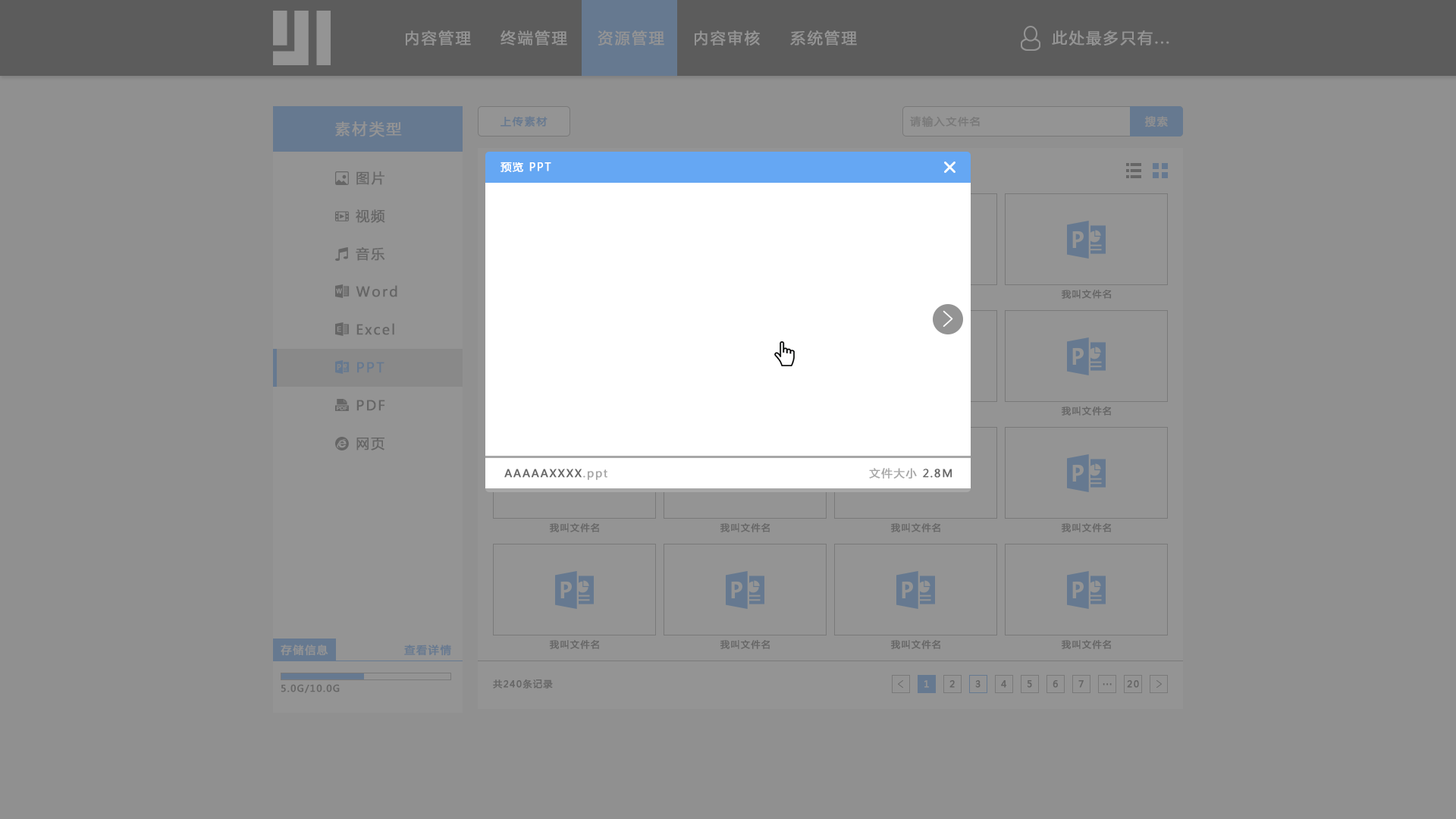
<style>
.page{position:relative;width:1456px;height:819px;background:#909090}
.page>*{position:absolute;margin:0}
.t1{font:15.2px "MicrosoftYaHei";letter-spacing:0.1em;color:#949494;font-weight:bold}
.t2{font:10.6px "MicrosoftYaHei";letter-spacing:0.1em;color:#667990;font-weight:bold}
.t3{font:10.6px "MicrosoftYaHei";letter-spacing:0.1em;color:#797979;font-weight:bold}
.t4{font:10.6px "MicrosoftYaHei";letter-spacing:0.1em;color:#909090;font-weight:bold}
.t5{font:10.6px "MicrosoftYaHei";letter-spacing:0.1em;color:#ffffff;font-weight:bold}
.t6{font:13.6px "MicrosoftYaHei";letter-spacing:0.1em;color:#666666;font-weight:bold}
.t7{font:9.1px "MicrosoftYaHei";letter-spacing:0.1em;color:#666666;font-weight:bold}
.t8{font:13.6px "MicrosoftYaHei";letter-spacing:0.1em;color:#667990;font-weight:bold}
.t9{font:10.6px "MicrosoftYaHei";letter-spacing:0.1em;color:#666666;font-weight:bold}
.t10{font:10.6px "MicrosoftYaHei";letter-spacing:0.1em;color:#a7a7a7;font-weight:bold}
.t11{font:10.6px "MicrosoftYaHei";letter-spacing:0.1em;color:#949494;font-weight:bold}
.t12{font:9px "MicrosoftYaHei";letter-spacing:0.1em;color:#666666;font-weight:bold}
.t13{font:9.1px "MicrosoftYaHei";letter-spacing:0.1em;color:#949494;font-weight:bold}
</style>
<div class="page">
<p class="t1" style="left:406px;top:30px;width:65px;height:15px">内容管理</p>
<p class="t1" style="left:500px;top:30px;width:67px;height:15px">终端管理</p>
<p class="t1" style="left:598px;top:30px;width:66px;height:15px">资源管理</p>
<p class="t1" style="left:695px;top:30px;width:65px;height:15px">内容审核</p>
<p class="t1" style="left:790px;top:30px;width:67px;height:15px">系统管理</p>
<p class="t1" style="left:1052px;top:30px;width:117px;height:15px">此处最多只有...</p>
<p class="t1" style="left:335px;top:121px;width:67px;height:16px">素材类型</p>
<p class="t2" style="left:500px;top:116px;width:48px;height:11px">上传素材</p>
<p class="t3" style="left:910px;top:116px;width:70px;height:11px">请输入文件名</p>
<p class="t4" style="left:1144px;top:116px;width:24px;height:11px">搜索</p>
<p class="t5" style="left:500px;top:162px;width:51px;height:10px">预览 PPT</p>
<p class="t6" style="left:356px;top:171px;width:28px;height:14px">图片</p>
<p class="t6" style="left:356px;top:209px;width:29px;height:14px">视频</p>
<p class="t6" style="left:356px;top:247px;width:29px;height:14px">音乐</p>
<p class="t6" style="left:356px;top:285px;width:41px;height:12px">Word</p>
<p class="t7" style="left:1061px;top:290px;width:51px;height:9px">我叫文件名</p>
<p class="t6" style="left:356px;top:323px;width:38px;height:12px">Excel</p>
<p class="t8" style="left:357px;top:362px;width:27px;height:11px">PPT</p>
<p class="t6" style="left:356px;top:400px;width:29px;height:11px">PDF</p>
<p class="t7" style="left:1061px;top:406px;width:50px;height:10px">我叫文件名</p>
<p class="t6" style="left:356px;top:438px;width:28px;height:12px">网页</p>
<p class="t9" style="left:504px;top:469px;width:103px;height:11px">AAAAAXXXX<span class="t10">.ppt</span></p>
<p class="t10" style="left:869px;top:468px;width:83px;height:11px">文件大小<span class="t9"> 2.8M</span></p>
<p class="t7" style="left:549px;top:522px;width:50px;height:10px">我叫文件名</p>
<p class="t7" style="left:720px;top:522px;width:50px;height:10px">我叫文件名</p>
<p class="t7" style="left:890px;top:522px;width:50px;height:10px">我叫文件名</p>
<p class="t7" style="left:1061px;top:522px;width:50px;height:10px">我叫文件名</p>
<p class="t7" style="left:549px;top:639px;width:50px;height:10px">我叫文件名</p>
<p class="t7" style="left:720px;top:639px;width:50px;height:10px">我叫文件名</p>
<p class="t7" style="left:890px;top:639px;width:50px;height:10px">我叫文件名</p>
<p class="t7" style="left:1061px;top:639px;width:50px;height:10px">我叫文件名</p>
<p class="t11" style="left:281px;top:645px;width:47px;height:11px">存储信息</p>
<p class="t2" style="left:404px;top:645px;width:47px;height:11px">查看详情</p>
<p class="t12" style="left:281px;top:684px;width:59px;height:9px">5.0G/10.0G</p>
<p class="t7" style="left:493px;top:679px;width:60px;height:10px">共240条记录</p>
<p class="t13" style="left:924px;top:680px;width:5px;height:8px">1</p>
<p class="t7" style="left:949px;top:680px;width:6px;height:8px">2</p>
<p class="t7" style="left:975px;top:680px;width:6px;height:8px">3</p>
<p class="t7" style="left:1001px;top:680px;width:6px;height:8px">4</p>
<p class="t7" style="left:1027px;top:680px;width:5px;height:8px">5</p>
<p class="t7" style="left:1053px;top:680px;width:5px;height:8px">6</p>
<p class="t7" style="left:1078px;top:680px;width:6px;height:8px">7</p>
<p class="t7" style="left:1103px;top:683px;width:9px;height:3px">...</p>
<p class="t7" style="left:1127px;top:680px;width:12px;height:8px">20</p>
</div>
